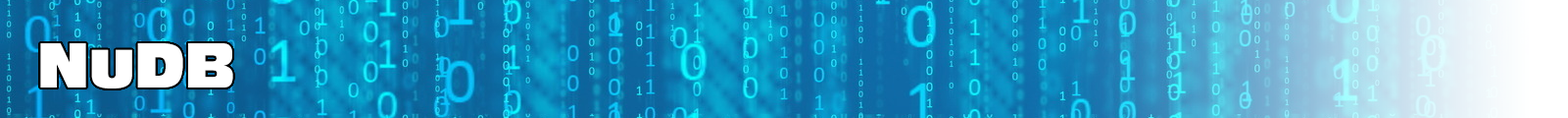
<style>
.page{position:relative;width:1568px;height:118px}
.page>*{position:absolute;margin:0}
.t1{font:58.8px "AntiqueOliveCompact-Regular";color:#ffffff}
</style>
<div class="page">
<p class="t1" style="left:40px;top:43px;width:193px;height:45px">NuDB</p>
</div>
